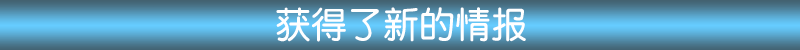
<style>
.page{position:relative;width:800px;height:50px}
.page>*{position:absolute;margin:0}
.t1{font:36px "GBYenRound-Bold";color:#ffffff}
</style>
<div class="page">
<p class="t1" style="left:276px;top:7px;width:250px;height:35px">获得了新的情报</p>
</div>
